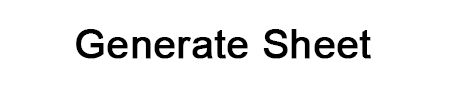
<style>
.page{position:relative;width:450px;height:90px;background:#ffffff}
.page>*{position:absolute;margin:0}
.t1{font:40px "ArialMT";color:#000000;font-weight:bold}
</style>
<div class="page">
<p class="t1" style="left:76px;top:29px;width:295px;height:30px">Generate Sheet</p>
</div>
